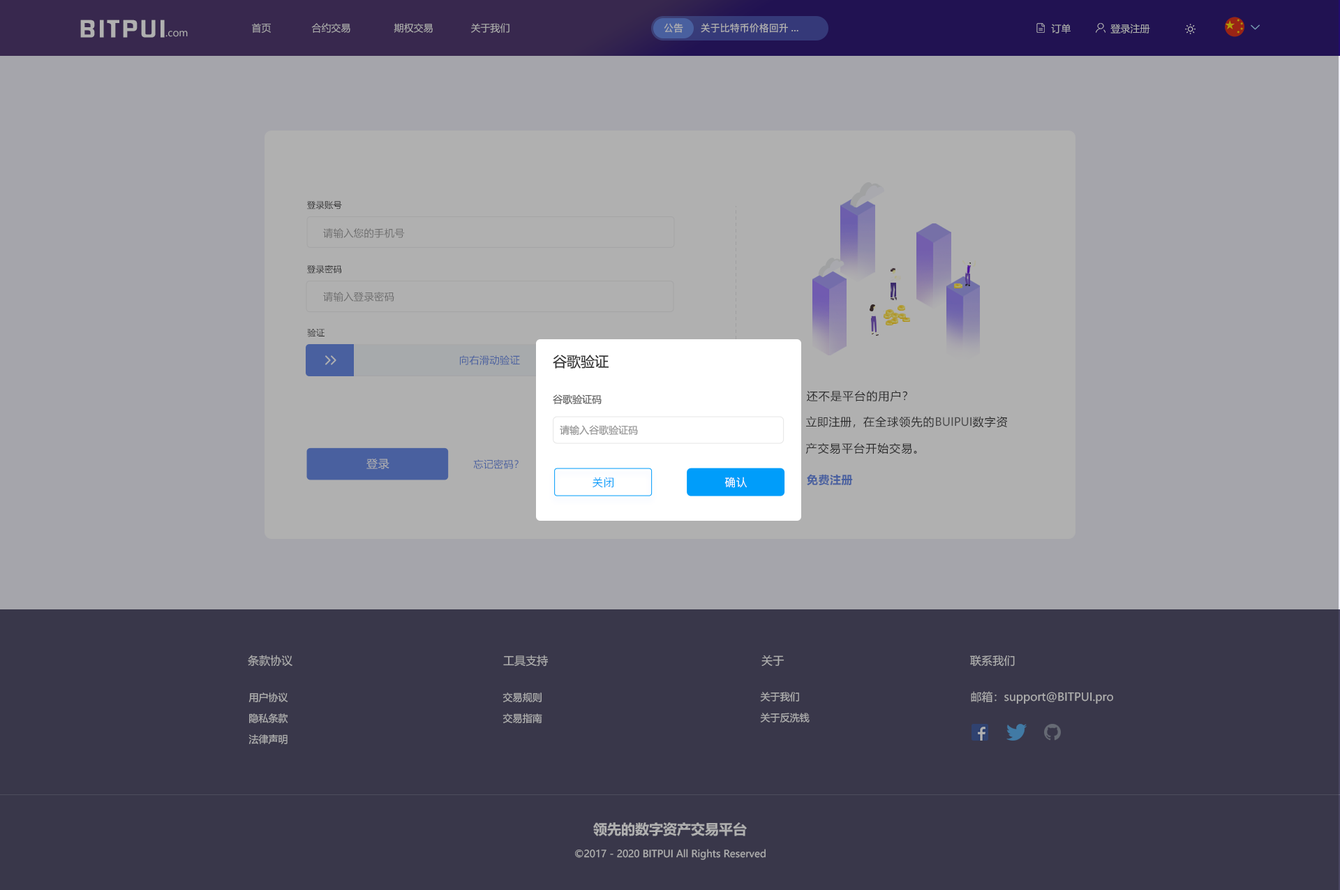
<style>
.page{position:relative;width:1340px;height:890px;background:#a5a5ab}
.page>*{position:absolute;margin:0}
.t1{font:21.4px "FZHZGBJW--GB1-0";letter-spacing:0.1em;color:#b0b0b0;scale:1.14 1}
.t2{font:9.8px "MicrosoftYaHei";color:#b0b0b0}
.t3{font:9.8px "PingFang-SC-Bold";color:#b0b0b0}
.t4{font:8.5px "MicrosoftYaHei";letter-spacing:0.03em;color:#333333}
.t5{font:9.9px "MicrosoftYaHei";letter-spacing:0.03em;color:#6d6d6e}
.t6{font:9.9px "MicrosoftYaHei";letter-spacing:0.03em;color:#49609f}
.t7{font:14px "MicrosoftYaHei";color:#333333}
.t8{font:9.8px "MicrosoftYaHei";color:#666666}
.t9{font:11.2px "MicrosoftYaHei";letter-spacing:0.07em;color:#333333}
.t10{font:9.8px "MicrosoftYaHei";color:#999999}
.t11{font:11.2px/26.5px "MicrosoftYaHei";letter-spacing:0.07em;color:#333333}
.t12{font:11.2px/26.5px "MicrosoftYaHei";letter-spacing:0.03em;color:#333333}
.t13{font:11.3px/33.9px "MicrosoftYaHei";color:#666666}
.t14{font:11.2px "MicrosoftYaHei";letter-spacing:0.03em;color:#b0b0b0}
.t15{font:9.8px "MicrosoftYaHei";letter-spacing:0.03em;color:#49609f}
.t16{font:11.2px "MicrosoftYaHei-Bold";letter-spacing:0.03em;color:#49609f}
.t17{font:11.2px "PingFang-SC-Medium";letter-spacing:0.02em;color:#009dfa}
.t18{font:11.2px "PingFang-SC-Medium";letter-spacing:0.02em;color:#ffffff}
.t19{font:11.2px "MicrosoftYaHei";color:#b0b0b0}
.t20{font:9.8px/20.9px "MicrosoftYaHei";color:#b0b0b0}
.t21{font:11.1px "MicrosoftYaHei";color:#b0b0b0}
.t22{font:14px "MicrosoftYaHei-Bold";color:#b0b0b0}
</style>
<div class="page">
<p class="t1" style="left:80px;top:20px;width:85px;height:18px">BITPUI</p>
<p class="t2" style="left:252px;top:23px;width:257px;height:10px">首页              合约交易               期权交易             关于我们</p>
<p class="t3" style="left:664px;top:23px;width:19px;height:10px">公告</p>
<p class="t3" style="left:701px;top:23px;width:97px;height:10px">关于比特币价格回升...</p>
<p class="t2" style="left:1051px;top:24px;width:20px;height:10px">订单</p>
<p class="t2" style="left:1110px;top:24px;width:40px;height:10px">登录注册</p>
<p class="t2" style="left:165px;top:31px;width:23px;height:6px">.com</p>
<p class="t4" style="left:307px;top:201px;width:35px;height:8px">登录账号</p>
<p class="t5" style="left:323px;top:228px;width:82px;height:10px">请输入您的手机号</p>
<p class="t4" style="left:307px;top:265px;width:34px;height:9px">登录密码</p>
<p class="t5" style="left:323px;top:292px;width:71px;height:10px">请输入登录密码</p>
<p class="t4" style="left:307px;top:329px;width:18px;height:8px">验证</p>
<p class="t6" style="left:460px;top:355px;width:60px;height:10px">向右滑动验证</p>
<p class="t7" style="left:553px;top:355px;width:56px;height:14px">谷歌验证</p>
<p class="t8" style="left:553px;top:394px;width:49px;height:10px">谷歌验证码</p>
<p class="t9" style="left:807px;top:390px;width:100px;height:12px">还不是平台的用户？</p>
<p class="t10" style="left:560px;top:425px;width:78px;height:11px">请输入谷歌验证码</p>
<p class="t11" style="left:805px;top:416px;width:203px;height:38px"><span class="t12">立即注册，</span>在全球领先的<span class="t13">BUIPUI</span>数字资<br>产交易平台开始交易。</p>
<p class="t14" style="left:366px;top:459px;width:23px;height:10px">登录</p>
<p class="t15" style="left:473px;top:459px;width:46px;height:10px">忘记密码？</p>
<p class="t16" style="left:807px;top:474px;width:46px;height:12px">免费注册</p>
<p class="t17" style="left:593px;top:477px;width:20px;height:11px">关闭</p>
<p class="t18" style="left:724px;top:477px;width:23px;height:11px">确认</p>
<p class="t19" style="left:248px;top:655px;width:44px;height:11px">条款协议</p>
<p class="t19" style="left:503px;top:655px;width:45px;height:12px">工具支持</p>
<p class="t19" style="left:761px;top:655px;width:23px;height:11px">关于</p>
<p class="t19" style="left:970px;top:655px;width:45px;height:12px">联系我们</p>
<p class="t20" style="left:248px;top:692px;width:40px;height:52px;text-align:center">用户协议<br>隐私条款<br>法律声明</p>
<p class="t20" style="left:503px;top:692px;width:39px;height:31px">交易规则<br>交易指南</p>
<p class="t20" style="left:760px;top:692px;width:50px;height:30px">关于我们<br>关于反洗钱</p>
<p class="t21" style="left:971px;top:691px;width:142px;height:13px">邮箱：support@BITPUI.pro</p>
<p class="t22" style="left:593px;top:822px;width:154px;height:14px">领先的数字资产交易平台</p>
<p class="t2" style="left:575px;top:849px;width:191px;height:11px">©2017 - 2020 BITPUI All Rights Reserved</p>
</div>
